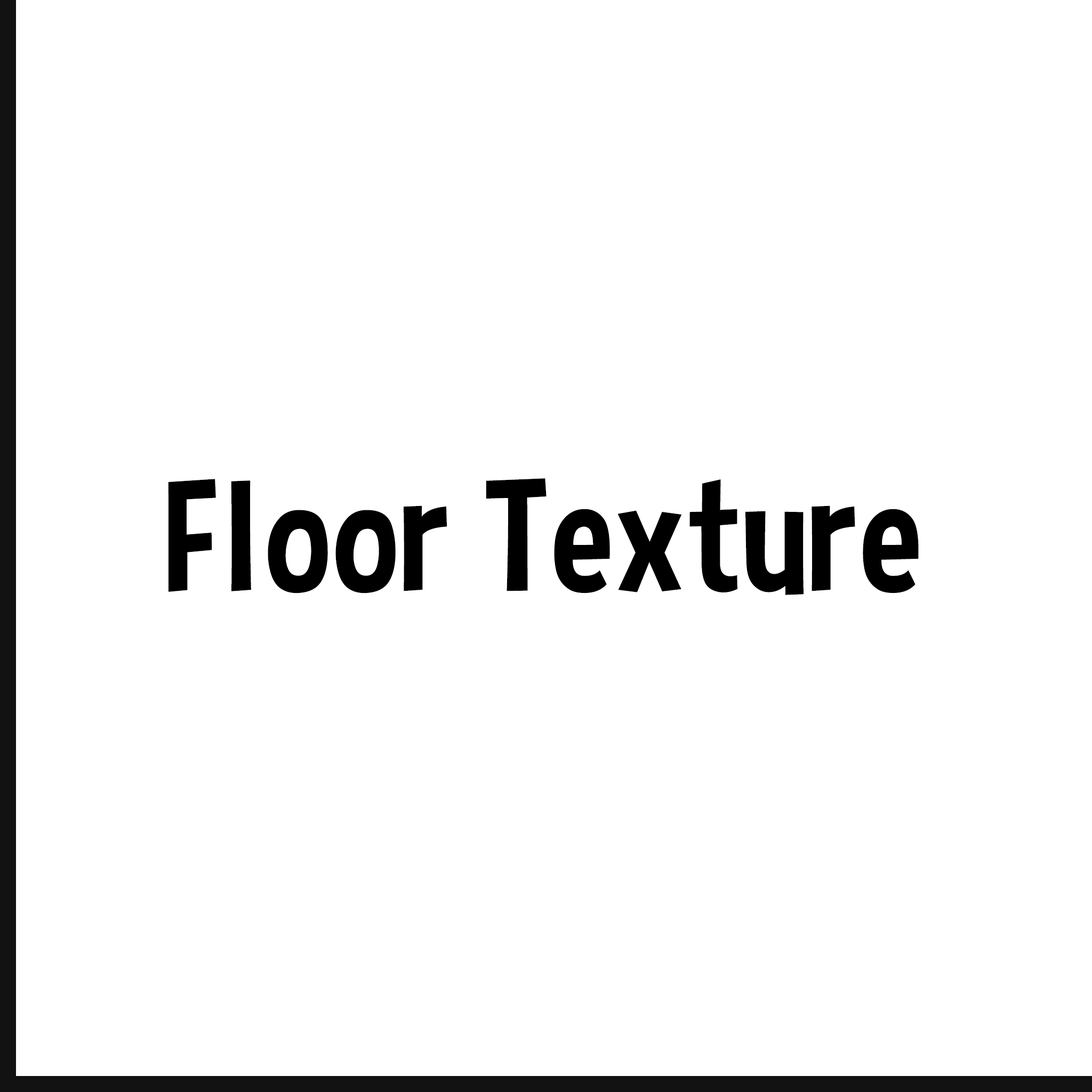
<style>
.page{position:relative;width:1092px;height:1092px;background:#ffffff}
.page>*{position:absolute;margin:0}
.t1{font:159.4px "CurseCasualRegular";color:#000000}
</style>
<div class="page">
<p class="t1" style="left:168px;top:478px;width:751px;height:117px">Floor Texture</p>
</div>
